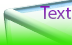
<style>
.page{position:relative;width:72px;height:45px}
.page>*{position:absolute;margin:0}
.t1{font:18px "MyriadPro-Regular";color:#640094}
</style>
<div class="page">
<p class="t1" style="left:40px;top:6px;width:32px;height:13px">Text</p>
</div>
